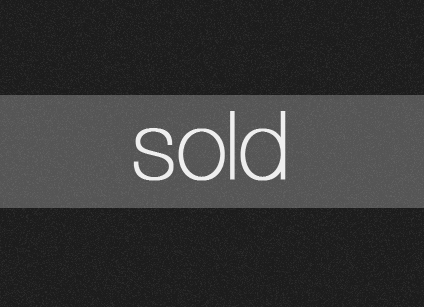
<style>
.page{position:relative;width:424px;height:307px;background:#1c1c1c}
.page>*{position:absolute;margin:0}
.t1{font:93.8px "HelveticaNeue-UltraLight";letter-spacing:-0.02em;color:#eeeeee;font-weight:bold}
</style>
<div class="page">
<p class="t1" style="left:133px;top:111px;width:153px;height:70px">sold</p>
</div>
